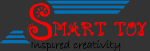
<style>
.page{position:relative;width:150px;height:51px;background:#333333}
.page>*{position:absolute;margin:0}
.t1{font:48px "Freak-Regular";color:#ff0000}
.t2{font:18px "Freak-Regular";color:#ff0000}
</style>
<div class="page">
<p class="t1" style="left:27px;top:3px;width:25px;height:38px">S</p>
<p class="t2" style="left:52px;top:21px;width:95px;height:16px">MART TOY</p>
</div>
